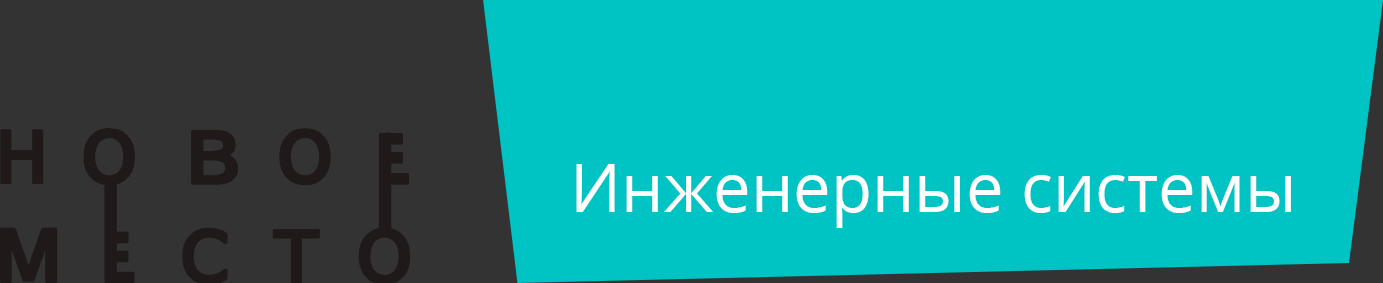
<style>
.page{position:relative;width:1383px;height:283px;background:#00c3c3}
.page>*{position:absolute;margin:0}
.t1{font:67px "OpenSans";color:#ffffff}
</style>
<div class="page">
<p class="t1" style="left:576px;top:164px;width:715px;height:64px">Инженерные системы</p>
</div>
